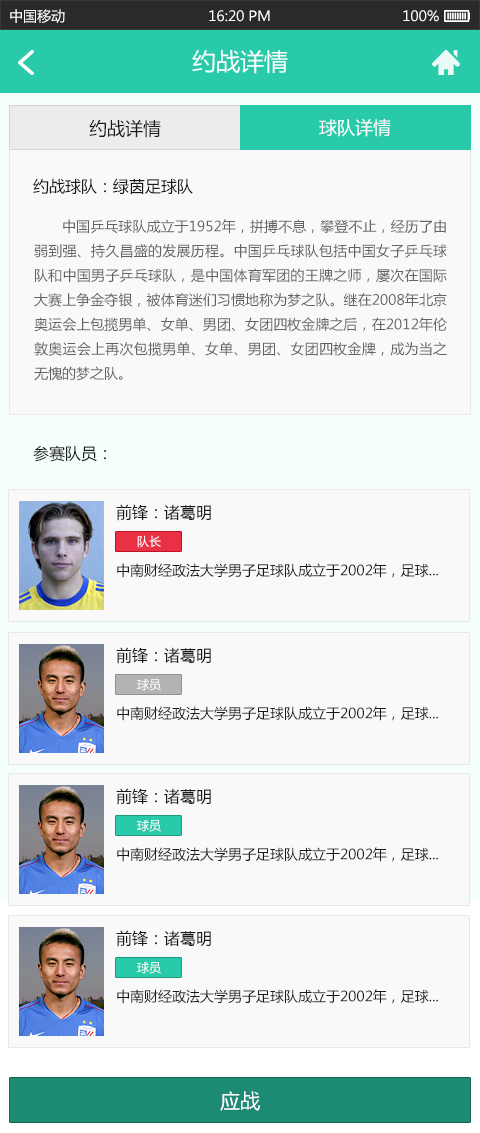
<style>
.page{position:relative;width:480px;height:1133px;background:#f9f9f9}
.page>*{position:absolute;margin:0}
.t1{font:14px "MicrosoftYaHei";color:#ffffff}
.t2{font:24px "MicrosoftYaHei";color:#f4fffd}
.t3{font:18px "MicrosoftYaHei";color:#191919}
.t4{font:18px "MicrosoftYaHei";color:#ffffff}
.t5{font:16px "MicrosoftYaHei";color:#191919}
.t6{font:14px "MicrosoftYaHei";color:#626262}
.t7{font:12px "MicrosoftYaHei";color:#ffffff}
.t8{font:14px "MicrosoftYaHei";color:#191919}
.t9{font:20px "MicrosoftYaHei";color:#ffffff}
</style>
<div class="page">
<p class="t1" style="left:10px;top:9px;width:55px;height:14px">中国移动</p>
<p class="t1" style="left:209px;top:10px;width:61px;height:12px">16:20 PM</p>
<p class="t1" style="left:403px;top:10px;width:36px;height:12px">100%</p>
<p class="t2" style="left:192px;top:50px;width:96px;height:24px">约战详情</p>
<p class="t3" style="left:89px;top:119px;width:72px;height:19px">约战详情</p>
<p class="t4" style="left:319px;top:118px;width:72px;height:19px">球队详情</p>
<p class="t5" style="left:33px;top:178px;width:160px;height:17px">约战球队：绿茵足球队</p>
<p class="t6" style="left:34px;top:219px;width:413px;height:162px;text-align:justify">中国乒乓球队成立于1952年，拼搏不息，攀登不止，经历了由弱到强、持久昌盛的发展历程。中国乒乓球队包括中国女子乒乓球队和中国男子乒乓球队，是中国体育军团的王牌之师，屡次在国际大赛上争金夺银，被体育迷们习惯地称为梦之队。继在2008年北京奥运会上包揽男单、女单、男团、女团四枚金牌之后，在2012年伦敦奥运会上再次包揽男单、女单、男团、女团四枚金牌，成为当之无愧的梦之队。</p>
<p class="t5" style="left:33px;top:445px;width:73px;height:17px">参赛队员：</p>
<p class="t5" style="left:116px;top:504px;width:95px;height:17px">前锋：诸葛明</p>
<p class="t7" style="left:137px;top:535px;width:24px;height:13px">队长</p>
<p class="t8" style="left:117px;top:563px;width:321px;height:15px">中南财经政法大学男子足球队成立于2002年，足球...</p>
<p class="t5" style="left:116px;top:647px;width:95px;height:17px">前锋：诸葛明</p>
<p class="t7" style="left:137px;top:679px;width:24px;height:12px">球员</p>
<p class="t8" style="left:117px;top:706px;width:321px;height:15px">中南财经政法大学男子足球队成立于2002年，足球...</p>
<p class="t5" style="left:116px;top:788px;width:95px;height:17px">前锋：诸葛明</p>
<p class="t7" style="left:137px;top:820px;width:24px;height:12px">球员</p>
<p class="t8" style="left:117px;top:847px;width:321px;height:15px">中南财经政法大学男子足球队成立于2002年，足球...</p>
<p class="t5" style="left:116px;top:930px;width:95px;height:17px">前锋：诸葛明</p>
<p class="t7" style="left:137px;top:962px;width:24px;height:12px">球员</p>
<p class="t8" style="left:117px;top:989px;width:321px;height:15px">中南财经政法大学男子足球队成立于2002年，足球...</p>
<p class="t9" style="left:220px;top:1091px;width:40px;height:20px">应战</p>
</div>
